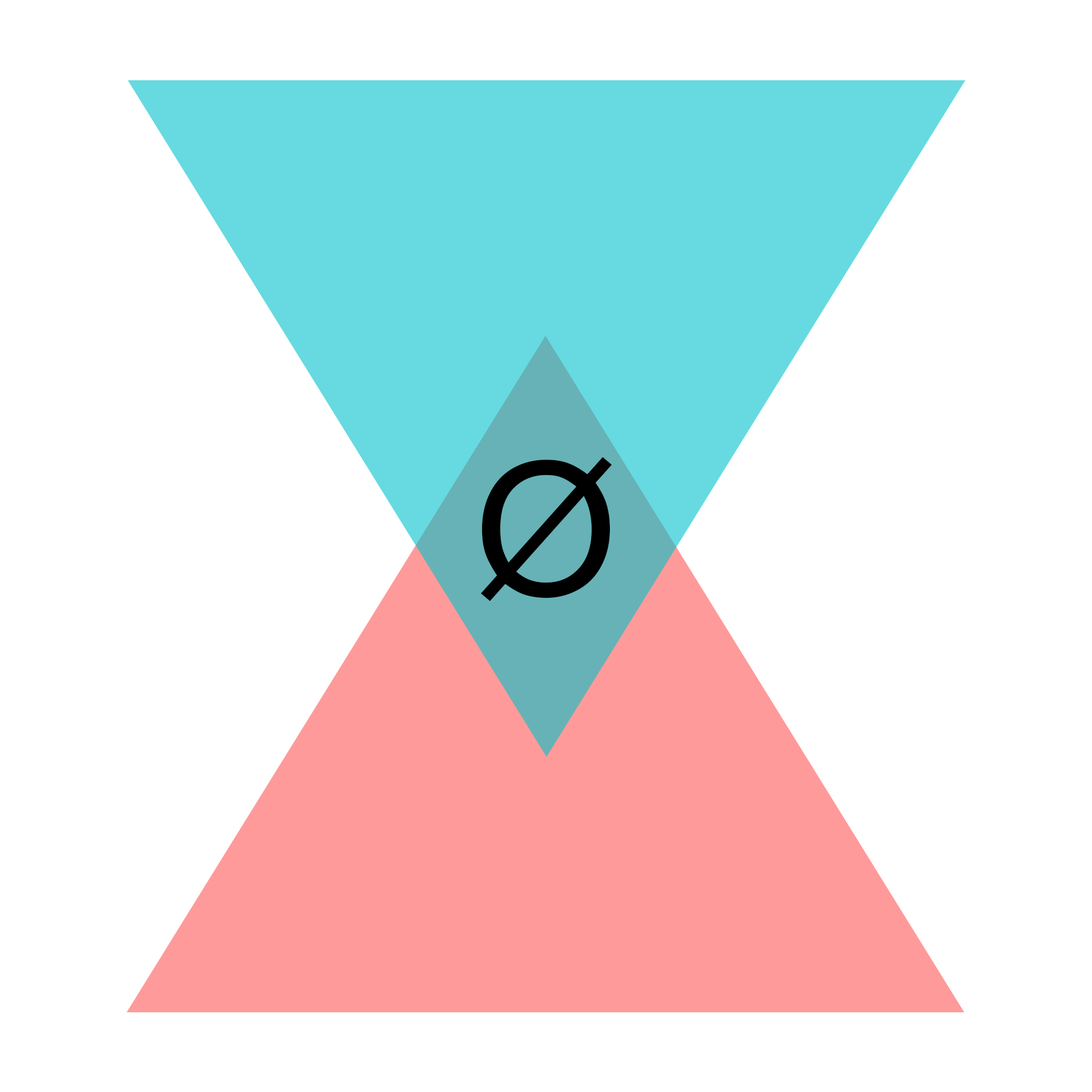
<style>
.page{position:relative;width:1092px;height:1092px;background:#ffffff}
.page>*{position:absolute;margin:0}
.t1{font:186.8px "ArialMT";color:#000000}
</style>
<div class="page">
<p class="t1" style="left:480px;top:457px;width:132px;height:144px">Ø</p>
</div>
